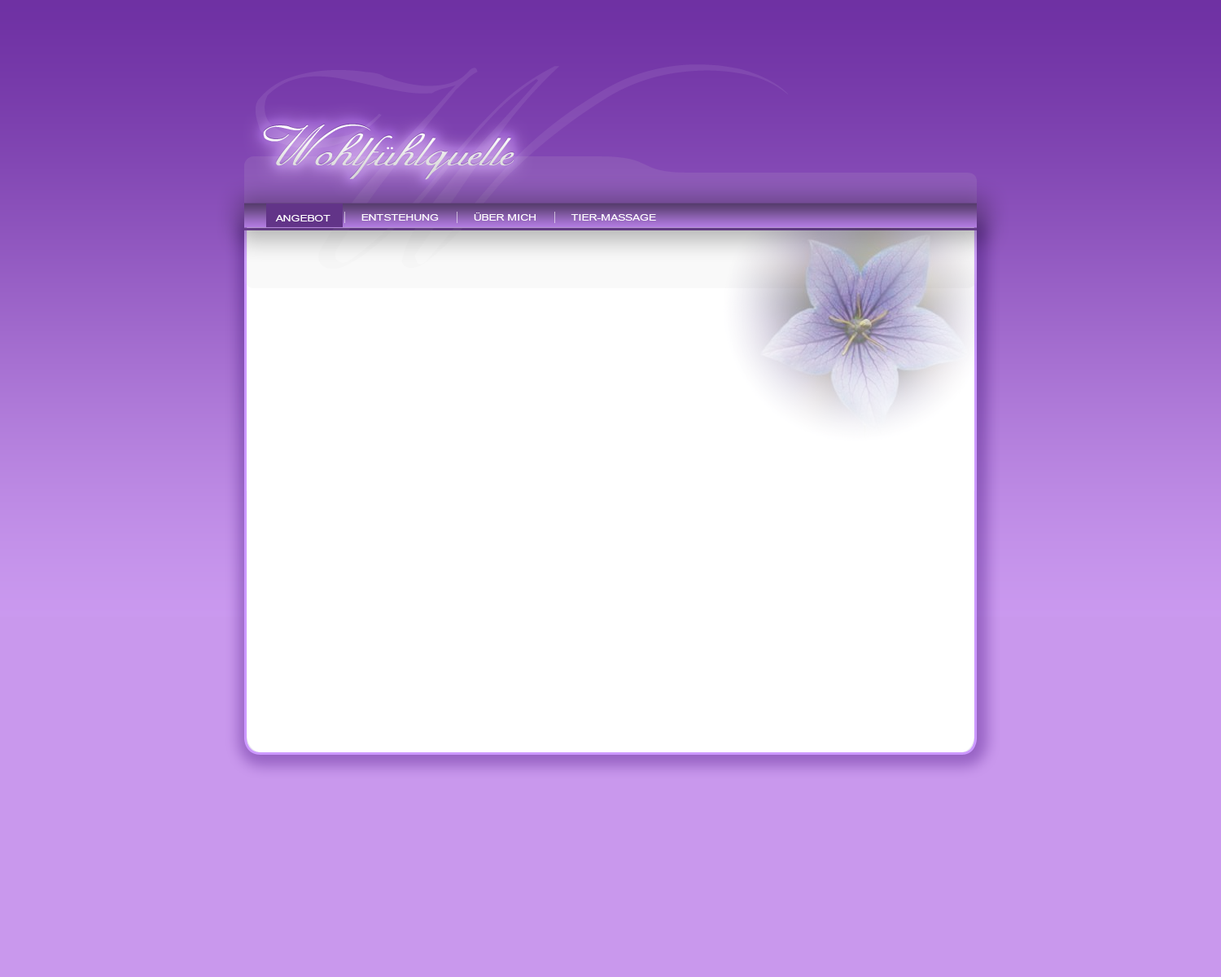
<style>
.page{position:relative;width:1221px;height:977px;background:#c998ed}
.page>*{position:absolute;margin:0}
.t1{font:65.1px "AdineKirnberg-Script";letter-spacing:-0.005em;scale:1.25 1}
.t2{font:65.1px "AdineKirnberg-Script";letter-spacing:-0.005em;color:#e8e8e8;scale:1.25 1}
.t3{font:9.1px "ArialMT";letter-spacing:-0.005em;color:#fefefe;scale:1.25 1}
</style>
<div class="page">
<p class="t1" style="left:263px;top:123px;width:251px;height:56px">Wohlfuhlquelle</p>
<p class="t2" style="left:263px;top:124px;width:251px;height:56px">Wohlfuhlquelle</p>
<p class="t3" style="left:361px;top:214px;width:78px;height:7px">ENTSTEHUNG</p>
<p class="t3" style="left:474px;top:212px;width:62px;height:9px">ÜBER MICH</p>
<p class="t3" style="left:571px;top:214px;width:85px;height:7px">TIER-MASSAGE</p>
</div>
